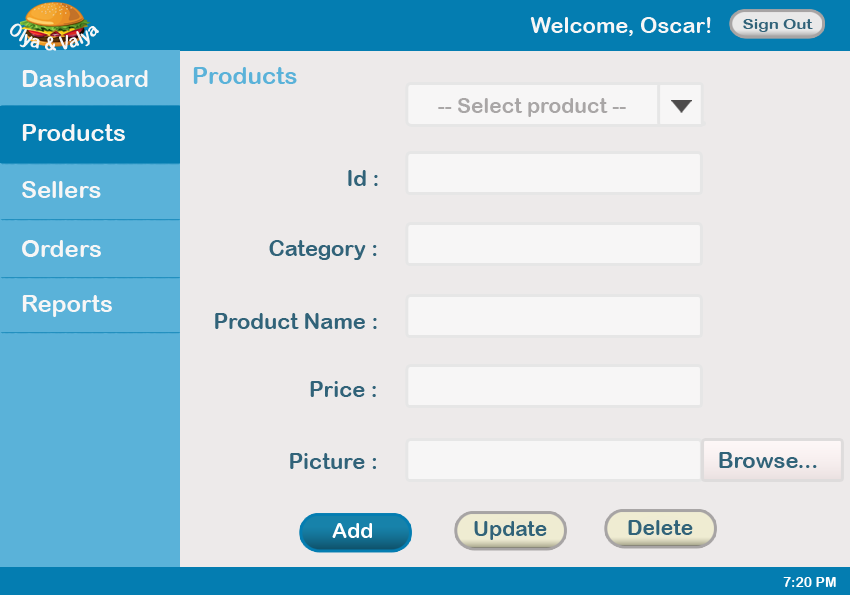
<style>
.page{position:relative;width:850px;height:595px;background:#edeaea}
.page>*{position:absolute;margin:0}
.t1{font:22px "ArialRoundedMTBold";color:#f7f6f6}
.t2{font:14px "ArialRoundedMTBold";color:#f7f6f6}
.t3{font:14px "ArialRoundedMTBold";color:#316379;scale:1.2 1}
.t4{font:24px "ArialRoundedMTBold";color:#f7f6f6}
.t5{font:24px "ArialRoundedMTBold";color:#5ab2d9}
.t6{font:21px "ArialRoundedMTBold";color:#a9a6a6}
.t7{font:22px "ArialRoundedMTBold";color:#316379}
.t8{font:21px "ArialRoundedMTBold";color:#316379}
.t9{font:21px "ArialRoundedMTBold";color:#ffffff}
.t10{font:14px "ArialRoundedMTBold";color:#ffffff}
</style>
<div class="page">
<p class="t1" style="left:530px;top:17px;width:181px;height:19px">Welcome, Oscar!</p>
<p class="t2" style="left:10px;top:23px;width:89px;height:28px">Olya &amp; Valya</p>
<p class="t3" style="left:743px;top:19px;width:70px;height:13px">Sign Out</p>
<p class="t4" style="left:22px;top:70px;width:126px;height:17px">Dashboard</p>
<p class="t5" style="left:193px;top:67px;width:104px;height:17px">Products</p>
<p class="t6" style="left:438px;top:98px;width:188px;height:19px">-- Select product --</p>
<p class="t4" style="left:22px;top:124px;width:103px;height:17px">Products</p>
<p class="t7" style="left:348px;top:170px;width:30px;height:16px">Id :</p>
<p class="t4" style="left:22px;top:181px;width:79px;height:17px">Sellers</p>
<p class="t4" style="left:22px;top:240px;width:79px;height:17px">Orders</p>
<p class="t7" style="left:269px;top:240px;width:108px;height:20px">Category :</p>
<p class="t4" style="left:22px;top:295px;width:90px;height:22px">Reports</p>
<p class="t7" style="left:215px;top:313px;width:162px;height:16px">Product Name :</p>
<p class="t7" style="left:310px;top:381px;width:66px;height:16px">Price :</p>
<p class="t7" style="left:290px;top:453px;width:86px;height:16px">Picture :</p>
<p class="t7" style="left:719px;top:452px;width:98px;height:16px">Browse...</p>
<p class="t8" style="left:474px;top:521px;width:73px;height:19px">Update</p>
<p class="t8" style="left:628px;top:520px;width:65px;height:15px">Delete</p>
<p class="t9" style="left:332px;top:523px;width:40px;height:15px">Add</p>
<p class="t10" style="left:783px;top:577px;width:53px;height:10px">7:20 PM</p>
</div>
